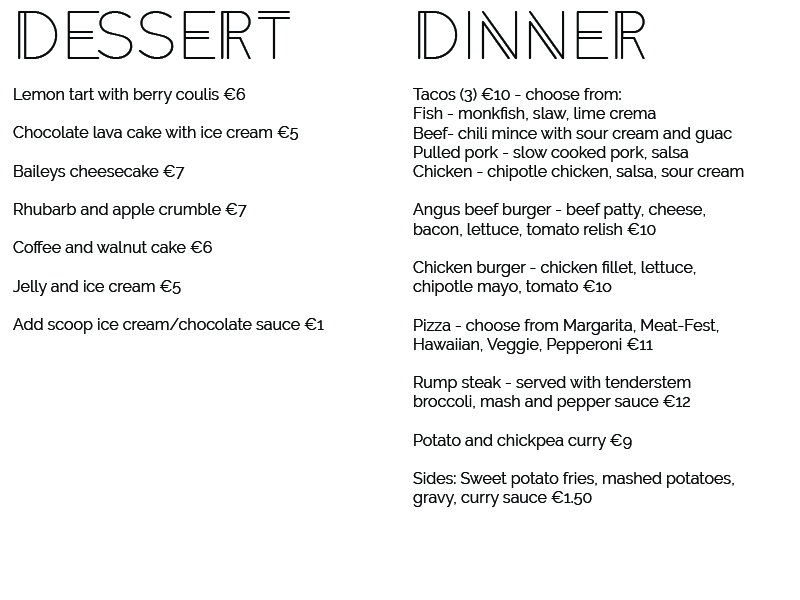
<style>
.page{position:relative;width:800px;height:600px;background:#ffffff}
.page>*{position:absolute;margin:0}
.t1{font:16px "Raleway-Regular";color:#070a0a}
.t2{font:60px "Anders";color:#070a0a}
.t3{font:16px "Anders";color:#070a0a}
</style>
<div class="page">
<p class="t1" style="left:13px;top:11px;width:311px;height:323px"><span class="t2">DESSERT<br><br></span>Lemon tart with berry coulis €6<br><br>Chocolate lava cake with ice cream €5<br><br>Baileys cheesecake €7<br><br>Rhubarb and apple crumble €7<br><br>Coffee and walnut cake €6<br><br>Jelly and ice cream €5<br><br>Add scoop ice cream/chocolate sauce €1</p>
<p class="t1" style="left:413px;top:11px;width:331px;height:496px"><span class="t3"><br><br><br></span><span class="t2">Dinner<br><br></span>Tacos (3) €10 - choose from:<br>Fish - monkfish, slaw, lime crema<br>Beef- chili mince with sour cream and guac<br>Pulled pork - slow cooked pork, salsa<br>Chicken - chipotle chicken, salsa, sour cream<br><br>Angus beef burger - beef patty, cheese,<br>bacon, lettuce, tomato relish €10<br><br>Chicken burger - chicken fillet, lettuce,<br>chipotle mayo, tomato €1o<br><br>Pizza - choose from Margarita, Meat-Fest,<br>Hawaiian, Veggie, Pepperoni €11<br><br>Rump steak - served with tenderstem<br>broccoli, mash and pepper sauce €12<br><br>Potato and chickpea curry €9<br><br>Sides: Sweet potato fries, mashed potatoes, <br>gravy, curry sauce €1.50</p>
</div>
